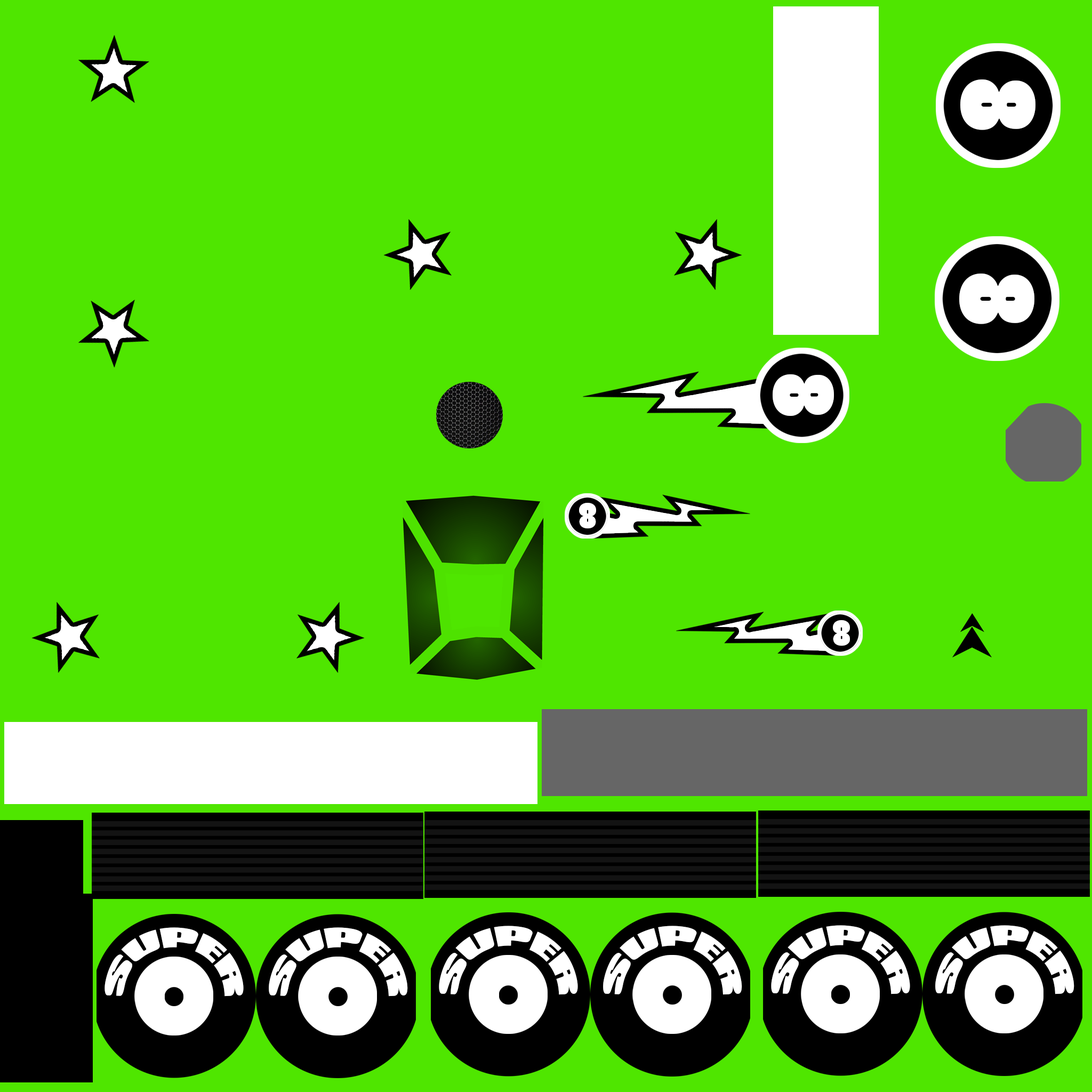
<style>
.page{position:relative;width:1092px;height:1092px;background:#4fe600}
.page>*{position:absolute;margin:0}
.t1{font:101.7px "PoplarStd";color:#ffffff;font-variant:small-caps;scale:1.18 1}
.t2{font:83.2px "PoplarStd";color:#ffffff;font-variant:small-caps;scale:1.19 1}
.t3{font:34.9px "PoplarStd";color:#ffffff;font-variant:small-caps;scale:1.18 1}
.t4{font:34.5px "CompactaBT-Black";color:#ffffff;font-variant:small-caps}
</style>
<div class="page">
<p class="t1" style="left:960px;top:79px;width:75px;height:51px;rotate:-90deg">8</p>
<p class="t1" style="left:959px;top:274px;width:75px;height:50px;rotate:-90deg">8</p>
<p class="t2" style="left:773px;top:374px;width:61px;height:42px;rotate:90deg">8</p>
<p class="t3" style="left:579px;top:503px;width:17px;height:25px;rotate:180deg">8</p>
<p class="t3" style="left:833px;top:620px;width:17px;height:26px;rotate:180deg">8</p>
<p class="t4" style="left:105px;top:927px;width:139px;height:70px">super</p>
<p class="t4" style="left:269px;top:927px;width:139px;height:70px">super</p>
<p class="t4" style="left:439px;top:926px;width:139px;height:69px">super</p>
<p class="t4" style="left:603px;top:926px;width:139px;height:69px">super</p>
<p class="t4" style="left:771px;top:925px;width:139px;height:69px">super</p>
<p class="t4" style="left:935px;top:925px;width:139px;height:69px">super</p>
</div>
